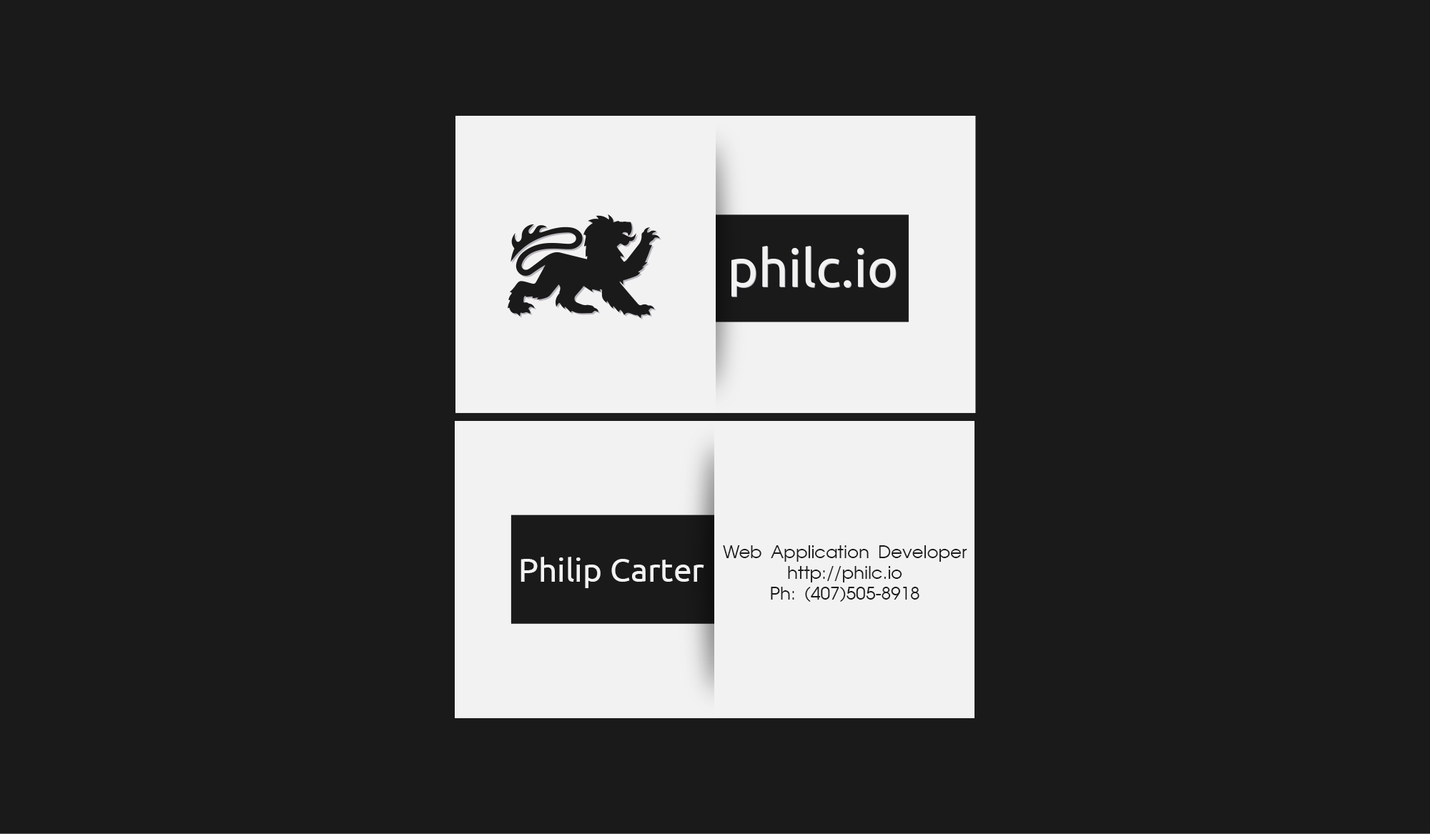
<style>
.page{position:relative;width:1430px;height:834px;background:#1a1a1a}
.page>*{position:absolute;margin:0}
.t1{font:17.5px "AGAvantGardeCyrBook";color:#1a1a1a}
.t2{font:33px "Ubuntu";color:#f2f2f2}
</style>
<div class="page">
<p class="t1" style="left:723px;top:545px;width:244px;height:57px;text-align:center">Web Application Developer<br>http://philc.io<br>Ph: (407)505-8918</p>
<p class="t2" style="left:520px;top:557px;width:184px;height:31px">Philip Carter</p>
</div>
